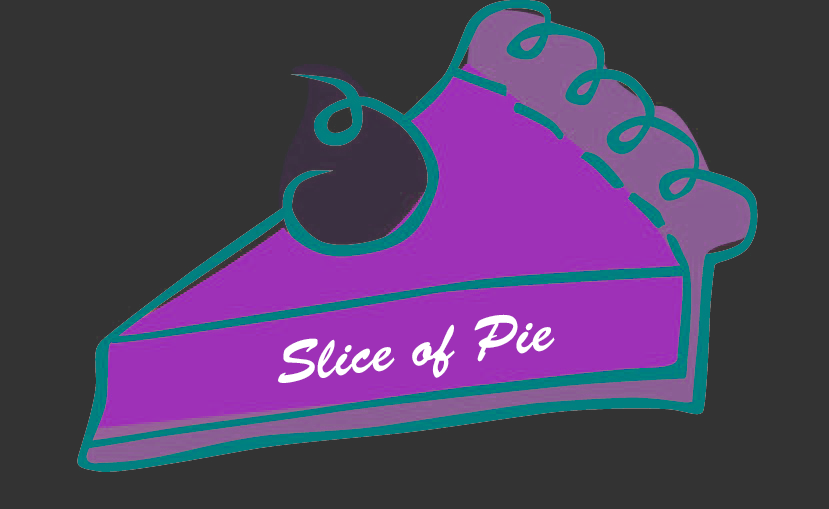
<style>
.page{position:relative;width:829px;height:509px;background:#333333}
.page>*{position:absolute;margin:0}
.t1{font:58.3px "BrushScriptStd";color:#ffffff}
</style>
<div class="page">
<p class="t1" style="left:278px;top:314px;width:277px;height:69px;rotate:-7deg">Slice of Pie</p>
</div>
